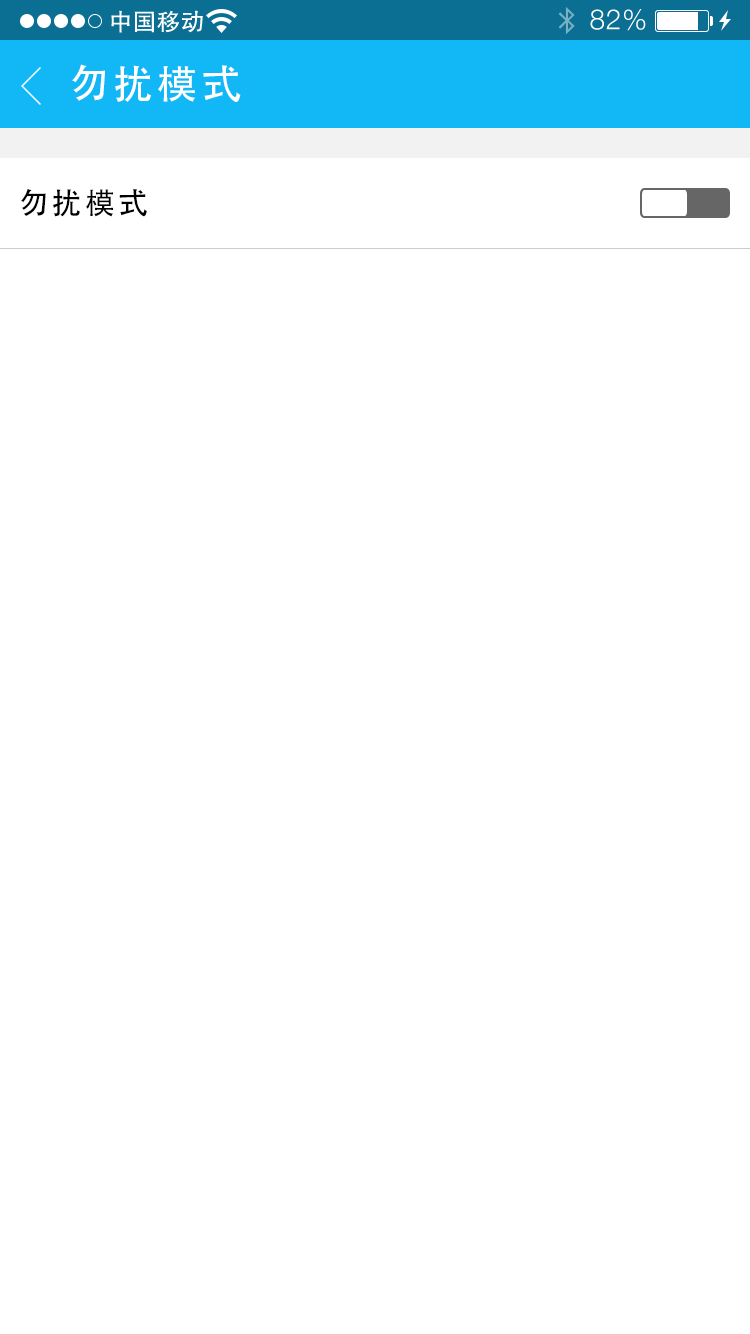
<style>
.page{position:relative;width:750px;height:1334px;background:#ffffff}
.page>*{position:absolute;margin:0}
.t1{font:40px "AdobeHeitiStd-Regular";letter-spacing:0.104em;color:#ffffff}
.t2{font:30px "AdobeHeitiStd-Regular";letter-spacing:0.104em;color:#000000}
</style>
<div class="page">
<p class="t1" style="left:72px;top:64px;width:169px;height:38px">勿扰模式</p>
<p class="t2" style="left:21px;top:189px;width:126px;height:28px">勿扰模式</p>
</div>
